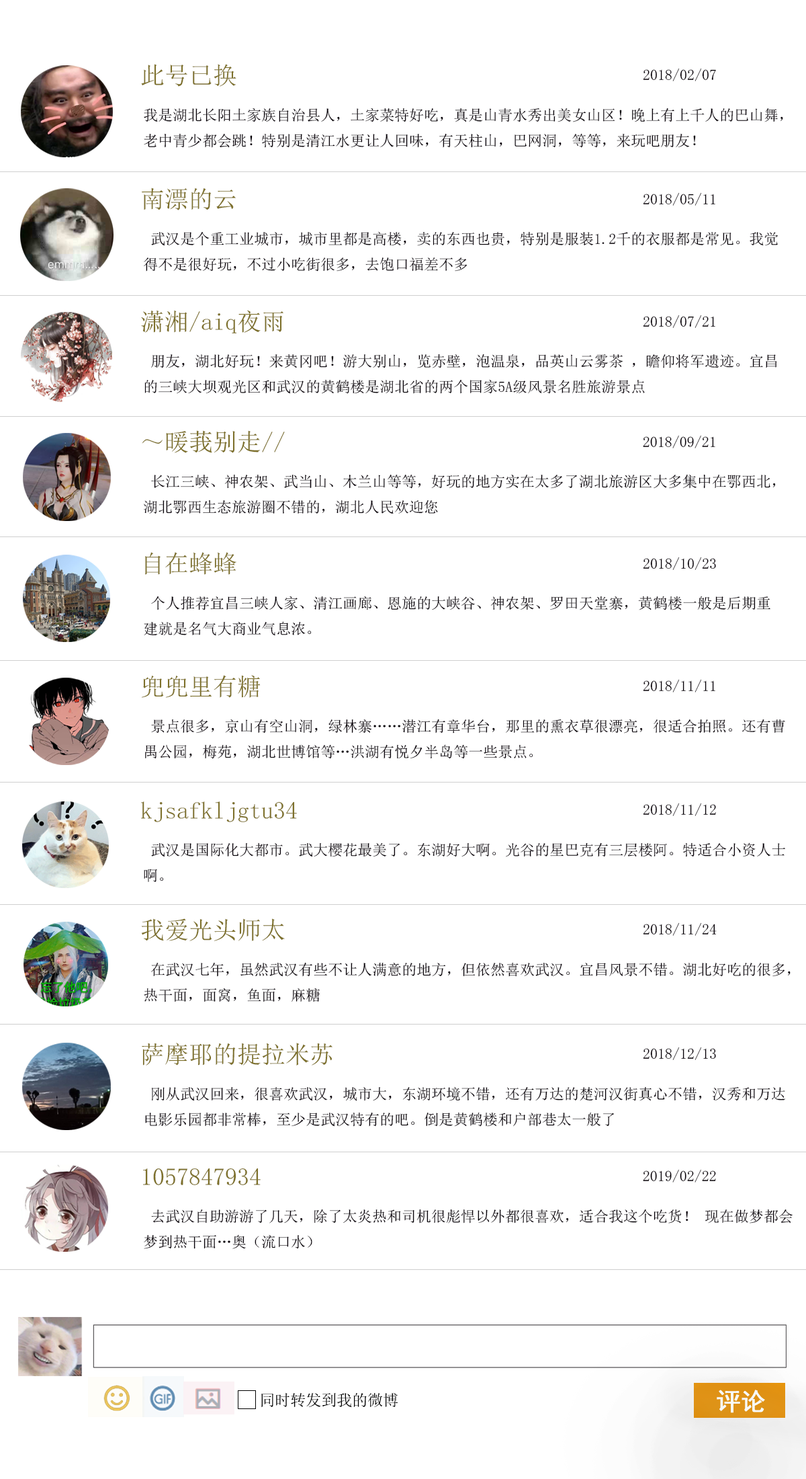
<style>
.page{position:relative;width:806px;height:1479px;background:#ffffff}
.page>*{position:absolute;margin:0}
.t1{font:24.2px "SimSun";color:#7d702a}
.t2{font:24.2px "SimSun";color:#471e4e}
.t3{font:14.8px "SimSun";color:#060007}
.t4{font:24.1px "SimSun";color:#7d702a}
.t5{font:24.1px "SimSun";color:#471e4e}
.t6{font:14.7px "SimSun";color:#060007}
.t7{font:15.5px "SimSun";color:#020202}
</style>
<div class="page">
<p class="t1" style="left:141px;top:64px;width:96px;height:23px"><span class="t2"> <br></span>此号已换</p>
<p class="t3" style="left:643px;top:68px;width:73px;height:13px">2018/02/07</p>
<p class="t3" style="left:144px;top:108px;width:640px;height:40px">我是湖北长阳土家族自治县人，土家菜特好吃，真是山青水秀出美女山区！晚上有上千人的巴山舞，<br>老中青少都会跳！特别是清江水更让人回味，有天柱山，巴网洞，等等，来玩吧朋友！</p>
<p class="t4" style="left:141px;top:188px;width:95px;height:22px"><span class="t5"> <br></span>南漂的云</p>
<p class="t6" style="left:643px;top:192px;width:73px;height:14px">2018/05/11</p>
<p class="t6" style="left:144px;top:231px;width:634px;height:41px">武汉是个重工业城市，城市里都是高楼，卖的东西也贵，特别是服装1.2千的衣服都是常见。我觉<br>得不是很好玩，不过小吃街很多，去饱口福差不多</p>
<p class="t4" style="left:141px;top:310px;width:143px;height:23px"><span class="t5"> <br></span>潇湘/aiq夜雨</p>
<p class="t6" style="left:643px;top:315px;width:73px;height:13px">2018/07/21</p>
<p class="t6" style="left:144px;top:354px;width:634px;height:40px">朋友，湖北好玩！来黄冈吧！游大别山，览赤壁，泡温泉，品英山云雾茶 ，瞻仰将军遗迹。宜昌<br>的三峡大坝观光区和武汉的黄鹤楼是湖北省的两个国家5A级风景名胜旅游景点</p>
<p class="t4" style="left:142px;top:430px;width:143px;height:23px"><span class="t5"> <br></span>～暖莪别走//</p>
<p class="t6" style="left:643px;top:435px;width:73px;height:13px">2018/09/21</p>
<p class="t6" style="left:144px;top:474px;width:632px;height:40px">长江三峡、神农架、武当山、木兰山等等，好玩的地方实在太多了湖北旅游区大多集中在鄂西北，<br>湖北鄂西生态旅游圈不错的，湖北人民欢迎您</p>
<p class="t4" style="left:145px;top:552px;width:92px;height:23px"><span class="t5"> <br></span>自在蜂蜂</p>
<p class="t6" style="left:643px;top:556px;width:73px;height:14px">2018/10/23</p>
<p class="t6" style="left:144px;top:595px;width:627px;height:41px">个人推荐宜昌三峡人家、清江画廊、恩施的大峡谷、神农架、罗田天堂寨，黄鹤楼一般是后期重<br>建就是名气大商业气息浓。</p>
<p class="t4" style="left:141px;top:675px;width:120px;height:23px"><span class="t5"> <br></span>兜兜里有糖</p>
<p class="t6" style="left:643px;top:679px;width:73px;height:13px">2018/11/11</p>
<p class="t6" style="left:145px;top:718px;width:641px;height:41px">景点很多，京山有空山洞，绿林寨……潜江有章华台，那里的熏衣草很漂亮，很适合拍照。还有曹<br>禺公园，梅苑，湖北世博馆等…洪湖有悦夕半岛等一些景点。</p>
<p class="t4" style="left:141px;top:801px;width:156px;height:21px"><span class="t5"> <br></span>kjsafkljgtu34</p>
<p class="t6" style="left:643px;top:802px;width:73px;height:14px">2018/11/12</p>
<p class="t6" style="left:144px;top:842px;width:642px;height:40px">武汉是国际化大都市。武大樱花最美了。东湖好大啊。光谷的星巴克有三层楼阿。特适合小资人士<br>啊。</p>
<p class="t4" style="left:141px;top:918px;width:144px;height:23px"><span class="t5"> <br></span>我爱光头师太</p>
<p class="t6" style="left:643px;top:922px;width:74px;height:14px">2018/11/24</p>
<p class="t6" style="left:144px;top:962px;width:647px;height:40px">在武汉七年，虽然武汉有些不让人满意的地方，但依然喜欢武汉。宜昌风景不错。湖北好吃的很多，<br>热干面，面窝，鱼面，麻糖</p>
<p class="t4" style="left:142px;top:1042px;width:191px;height:23px"><span class="t5"> <br></span>萨摩耶的提拉米苏</p>
<p class="t6" style="left:643px;top:1046px;width:73px;height:14px">2018/12/13</p>
<p class="t6" style="left:145px;top:1086px;width:641px;height:40px">刚从武汉回来，很喜欢武汉，城市大，东湖环境不错，还有万达的楚河汉街真心不错，汉秀和万达<br>电影乐园都非常棒，至少是武汉特有的吧。倒是黄鹤楼和户部巷太一般了</p>
<p class="t4" style="left:143px;top:1167px;width:118px;height:18px"><span class="t5"> <br></span>1057847934</p>
<p class="t6" style="left:643px;top:1169px;width:73px;height:13px">2019/02/22</p>
<p class="t6" style="left:144px;top:1208px;width:650px;height:41px">去武汉自助游游了几天，除了太炎热和司机很彪悍以外都很喜欢，适合我这个吃货！ 现在做梦都会<br>梦到热干面…奥（流口水）</p>
<p class="t7" style="left:261px;top:1393px;width:138px;height:14px">同时转发到我的微博</p>
</div>
